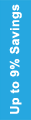
<style>
.page{position:relative;width:31px;height:120px;background:#26a7e0}
.page>*{position:absolute;margin:0}
.t1{font:12.5px "Arial-BoldMT";letter-spacing:0.03em;color:#ffffff}
</style>
<div class="page">
<p class="t1" style="left:9px;top:4px;width:13px;height:110px;rotate:-90deg">Up to 9% Savings</p>
</div>
